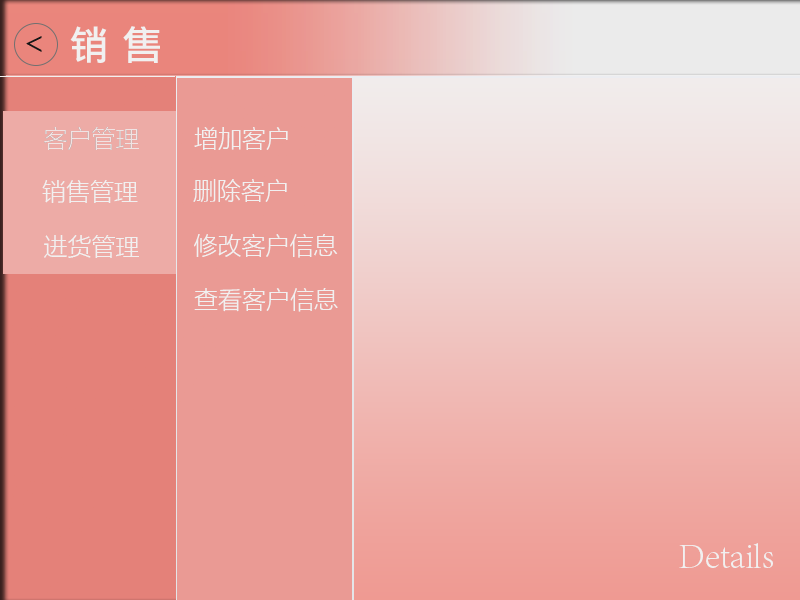
<style>
.page{position:relative;width:800px;height:600px}
.page>*{position:absolute;margin:0}
.t1{font:39.9px "LiHeiPro";color:#f1f0f0}
.t2{font:24px "MicrosoftYaHeiLight";color:#f0e3e3}
.t3{font:24px "MicrosoftYaHeiLight";color:#f1f0f0}
.t4{font:36px "AdobeSongStd-Light";color:#f1f0f0}
</style>
<div class="page">
<p class="t1" style="left:70px;top:26px;width:90px;height:37px">销 售</p>
<p class="t2" style="left:44px;top:127px;width:95px;height:23px">客户管理</p>
<p class="t2" style="left:44px;top:127px;width:95px;height:23px">客户管理</p>
<p class="t3" style="left:194px;top:127px;width:94px;height:23px">增加客户</p>
<p class="t3" style="left:42px;top:180px;width:96px;height:23px">销售管理</p>
<p class="t3" style="left:193px;top:179px;width:94px;height:23px">删除客户</p>
<p class="t3" style="left:44px;top:235px;width:95px;height:23px">进货管理</p>
<p class="t3" style="left:194px;top:234px;width:144px;height:24px">修改客户信息</p>
<p class="t3" style="left:194px;top:288px;width:144px;height:24px">查看客户信息</p>
<p class="t4" style="left:679px;top:543px;width:94px;height:25px">Details</p>
</div>
